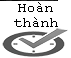
<style>
.page{position:relative;width:71px;height:58px;background:#ffffff}
.page>*{position:absolute;margin:0}
.t1{font:15px/15px "CourierNewPSMT";color:#000000}
</style>
<div class="page">
<p class="t1" style="left:14px;top:2px;width:44px;height:25px;text-align:center">Hoàn<br>thành</p>
</div>
